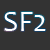
<style>
.page{position:relative;width:50px;height:50px;background:#333333}
.page>*{position:absolute;margin:0}
.t1{font:30px "Candara";color:#ffffff}
</style>
<div class="page">
<p class="t1" style="left:4px;top:12px;width:42px;height:19px">SF2</p>
</div>
